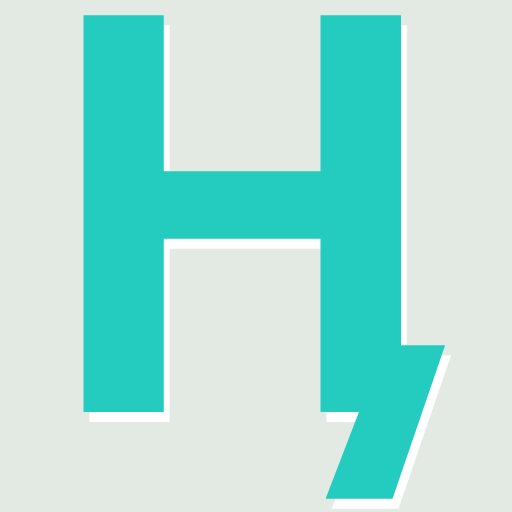
<style>
.page{position:relative;width:512px;height:512px;background:#e3e9e3}
.page>*{position:absolute;margin:0}
.t1{font:554.2px "Arial-BoldMT";color:#23ccbe}
</style>
<div class="page">
<p class="t1" style="left:83px;top:15px;width:362px;height:484px">Ӊ</p>
</div>
